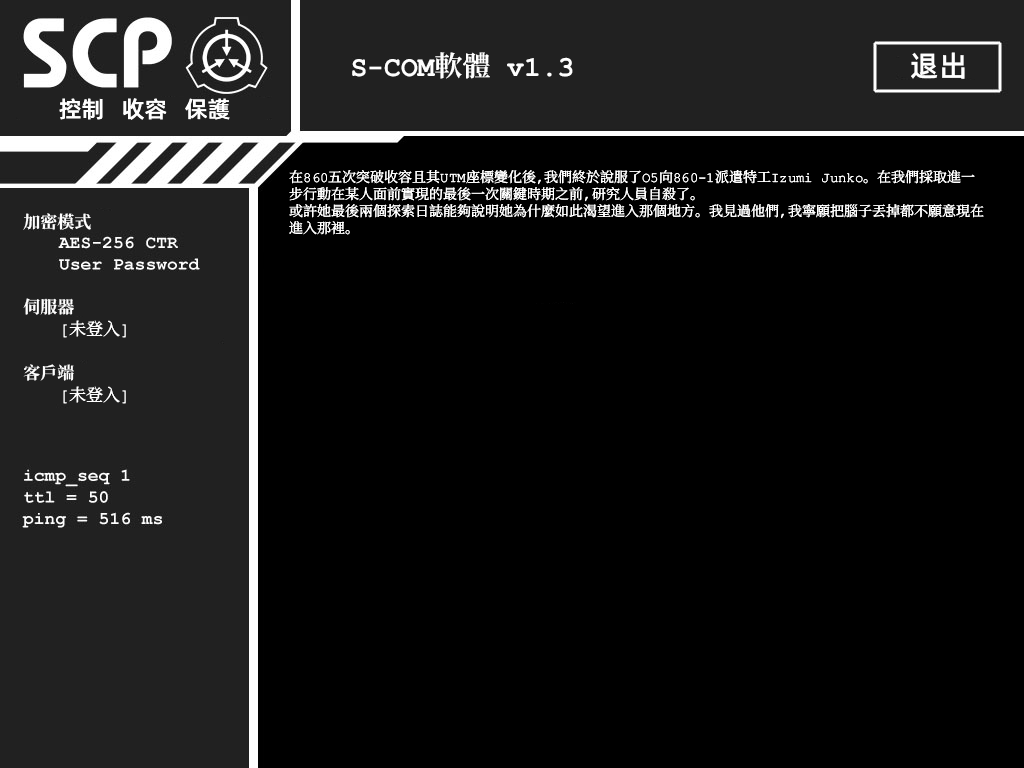
<style>
.page{position:relative;width:1024px;height:768px;background:#000000}
.page>*{position:absolute;margin:0}
.t1{font:28px "ContainmentBreach-Bold";color:#ffffff}
.t2{font:29px "AlibabaPuHuiTiM";color:#ffffff}
.t3{font:23px "AlibabaPuHuiTiM";color:#ffffff}
.t4{font:14px/17px "ContainmentBreach-Regular";color:#ffffff}
.t5{font:17px/18px "ContainmentBreach-Regular";color:#ffffff}
.t6{font:17px/17px "ContainmentBreach-Bold";color:#ffffff}
.t7{font:17px/22px "ContainmentBreach-Bold";color:#ffffff}
.t8{font:17px/22px "ContainmentBreach-Regular";color:#ffffff}
</style>
<div class="page">
<p class="t1" style="left:352px;top:52px;width:221px;height:27px">S-COM軟體 v1.3</p>
<p class="t2" style="left:911px;top:52px;width:54px;height:27px">退出</p>
<p class="t3" style="left:59px;top:98px;width:171px;height:22px">控制   收容   保護</p>
<p class="t4" style="left:289px;top:170px;width:695px;height:65px">在860五次突破收容且其UTM座標變化後，我們終於說服了O5向860-1派遣特工Izumi Junko。在我們採取進一<br>步行動在某人面前實現的最後一次關鍵時期之前，研究人員自殺了。<br>或許她最後兩個探索日誌能夠說明她為什麼如此渴望進入那個地方。我見過他們，我寧願把腦子丟掉都不願意現在<br>進入那裡。</p>
<p class="t5" style="left:23px;top:213px;width:103px;height:191px"><span class="t6">加密模式<br><br><br><br><br></span><span class="t7">伺服器<br> </span>[未登入]<br><br><span class="t7">客戶端<br> </span><span class="t8">[未登入]</span></p>
</div>
